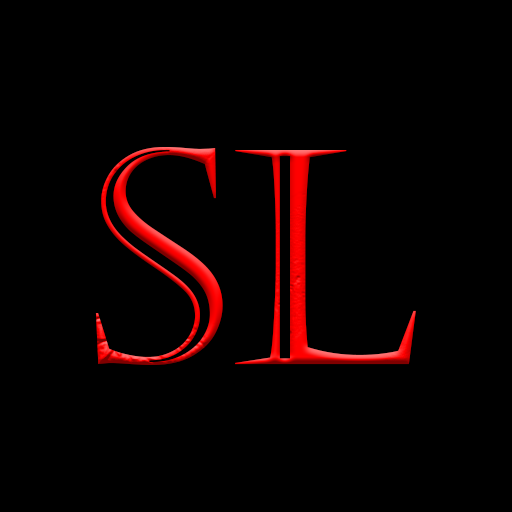
<style>
.page{position:relative;width:512px;height:512px;background:#000000}
.page>*{position:absolute;margin:0}
.t1{font:300px "Castellar"}
</style>
<div class="page">
<p class="t1" style="left:95px;top:147px;width:321px;height:218px">SL</p>
</div>
